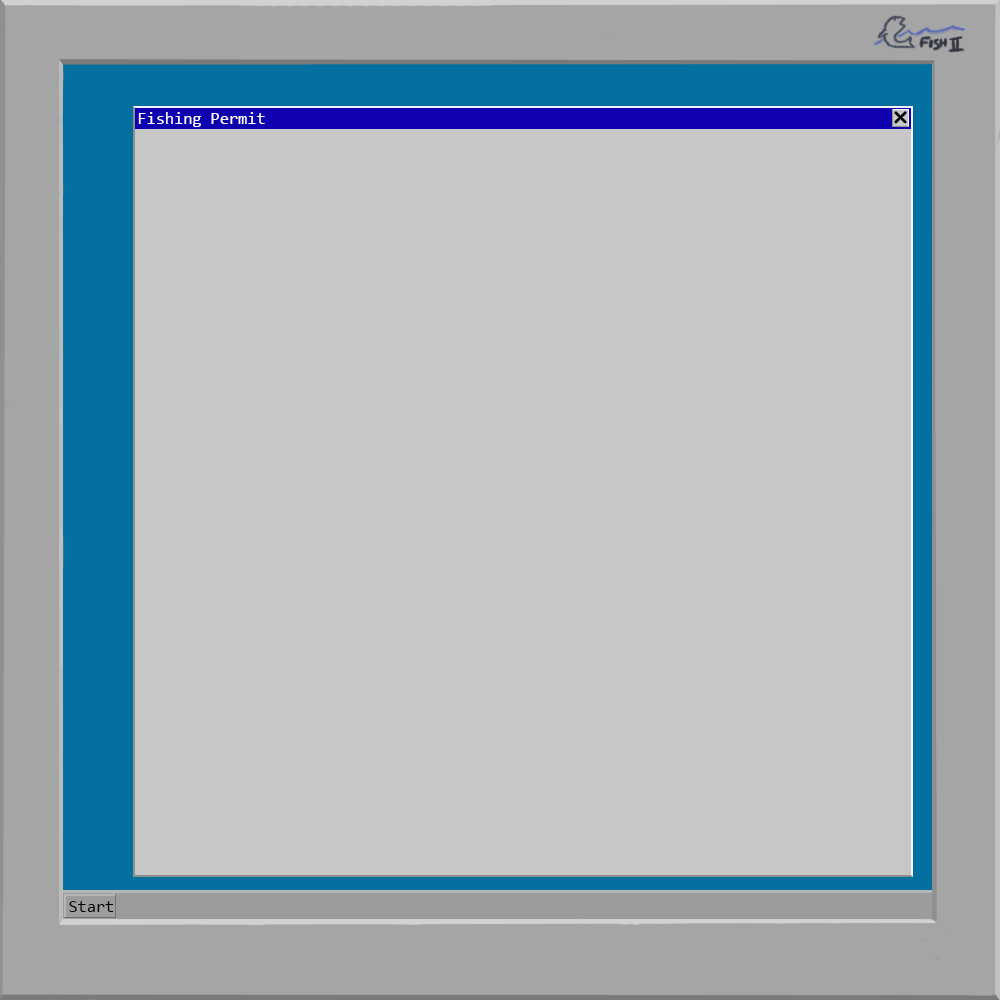
<style>
.page{position:relative;width:1000px;height:1000px;background:#c7c7c7}
.page>*{position:absolute;margin:0}
.t1{font:16.7px "Consolas";color:#fefefe}
.t2{font:16.7px "Consolas";color:#000000}
</style>
<div class="page">
<p class="t1" style="left:138px;top:112px;width:127px;height:15px">Fishing Permit</p>
<p class="t2" style="left:69px;top:901px;width:45px;height:11px">Start</p>
</div>
